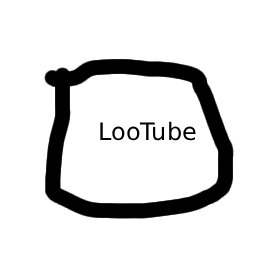
<style>
.page{position:relative;width:256px;height:256px;background:#ffffff}
.page>*{position:absolute;margin:0}
.t1{font:24px "DejaVuSans";color:#000000}
</style>
<div class="page">
<p class="t1" style="left:100px;top:121px;width:96px;height:20px">LooTube</p>
</div>
